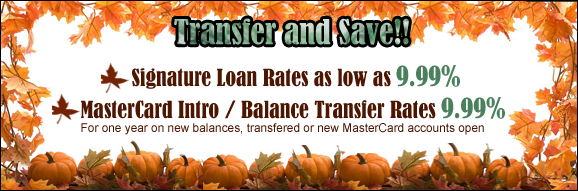
<style>
.page{position:relative;width:578px;height:191px;background:#ffffff}
.page>*{position:absolute;margin:0}
.t1{font:32px "BernardMT-Condensed"}
.t2{font:22px "BernardMT-Condensed";color:#4c1601}
.t3{font:26px "BernardMT-Condensed";color:#4a805b}
.t4{font:12px "ArialMT";color:#4c1601}
</style>
<div class="page">
<p class="t1" style="left:174px;top:18px;width:235px;height:27px">Transfer and Save!!</p>
<p class="t2" style="left:132px;top:65px;width:328px;height:24px">Signature Loan Rates as low as <span class="t3">9.99%</span></p>
<p class="t2" style="left:81px;top:97px;width:424px;height:22px">MasterCard Intro / Balance Transfer Rates <span class="t3">9.99%</span></p>
<p class="t4" style="left:81px;top:123px;width:403px;height:12px">For one year on new balances, transfered or new MasterCard accounts open</p>
</div>
